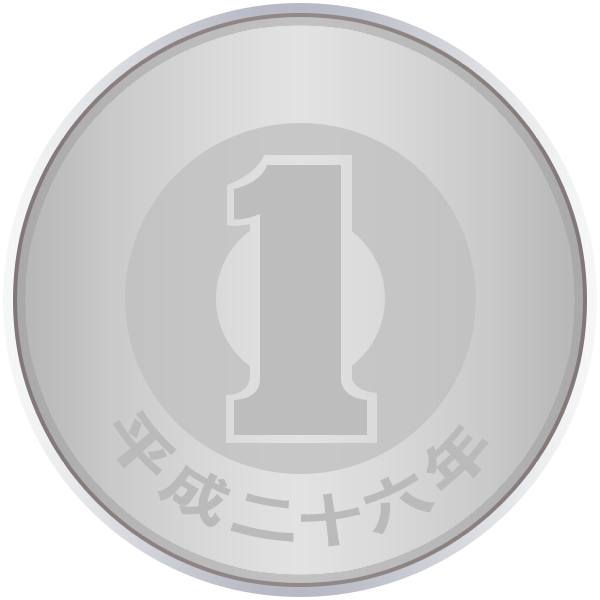
<style>
.page{position:relative;width:600px;height:600px;background:#ffffff}
.page>*{position:absolute;margin:0}
.t1{font:55px "HiraginoKaku-W7-90msp-RKSJ-H";letter-spacing:0.1em;color:#bababa;scale:0.9 1}
</style>
<div class="page">
<p class="t1" style="left:112px;top:410px;width:377px;height:137px;rotate:1deg">平成二十六年</p>
</div>
